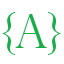
<style>
.page{position:relative;width:64px;height:64px;background:#ffffff}
.page>*{position:absolute;margin:0}
.t1{font:47.2px "PerpetuaTitlingMT-Light";color:#17ad49}
</style>
<div class="page">
<p class="t1" style="left:2px;top:12px;width:59px;height:43px">{A}</p>
</div>
